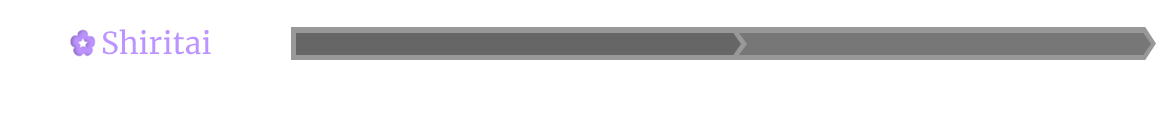
<style>
.page{position:relative;width:1165px;height:129px;background:#ffffff}
.page>*{position:absolute;margin:0}
.t1{font:30px "Merriweather-Regular";color:#bc93ff}
</style>
<div class="page">
<p class="t1" style="left:102px;top:29px;width:109px;height:26px">Shiritai</p>
</div>
